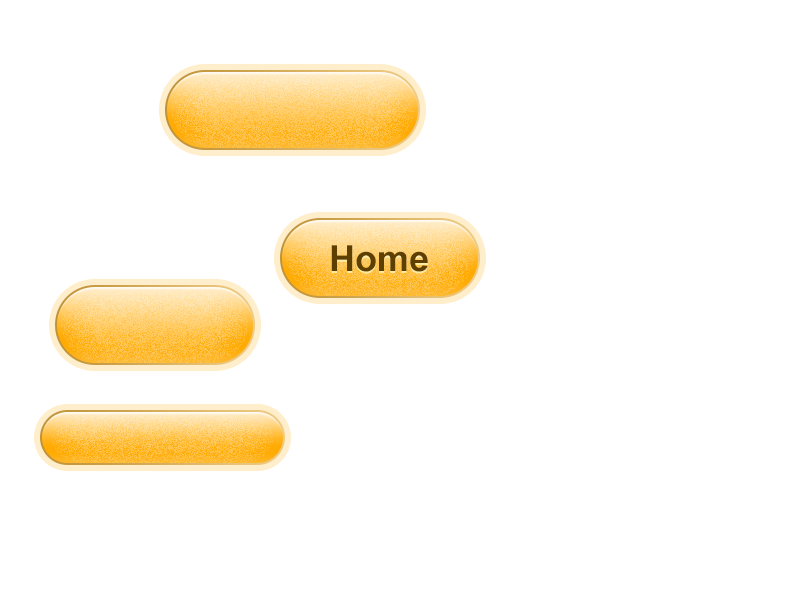
<style>
.page{position:relative;width:800px;height:600px;background:#ffffff}
.page>*{position:absolute;margin:0}
.t1{font:36px "Arial-BoldMT";color:#5f3f00}
</style>
<div class="page">
<p class="t1" style="left:331px;top:245px;width:97px;height:27px">Home</p>
</div>
